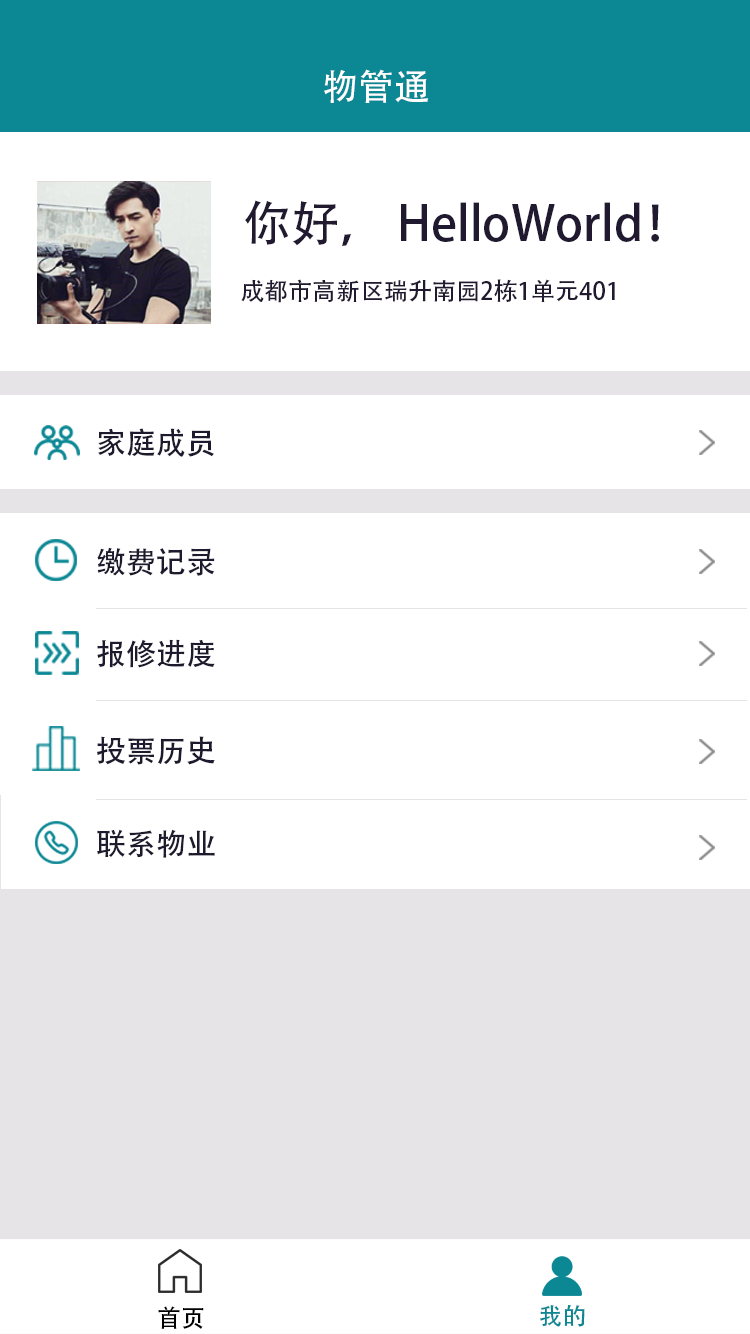
<style>
.page{position:relative;width:750px;height:1334px;background:#ffffff}
.page>*{position:absolute;margin:0}
.t1{font:36px "AdobeHeitiStd-Regular";color:#ffffff}
.t2{font:48px "AdobeHeitiStd-Regular";color:#20192f}
.t3{font:24px "AdobeHeitiStd-Regular";color:#20192f}
.t4{font:30px "AdobeHeitiStd-Regular";color:#1e1a2e}
.t5{font:24px "AdobeHeitiStd-Regular";color:#000000}
.t6{font:24px "AdobeHeitiStd-Regular";color:#0c8894}
</style>
<div class="page">
<p class="t1" style="left:324px;top:69px;width:105px;height:34px">物管通</p>
<p class="t2" style="left:245px;top:200px;width:414px;height:46px">你好， HelloWorld！</p>
<p class="t3" style="left:241px;top:279px;width:374px;height:24px">成都市高新区瑞升南园2栋1单元401</p>
<p class="t4" style="left:98px;top:428px;width:116px;height:29px">家庭成员</p>
<p class="t4" style="left:97px;top:547px;width:118px;height:29px">缴费记录</p>
<p class="t4" style="left:97px;top:639px;width:118px;height:29px">报修进度</p>
<p class="t4" style="left:97px;top:736px;width:118px;height:29px">投票历史</p>
<p class="t4" style="left:97px;top:829px;width:118px;height:29px">联系物业</p>
<p class="t5" style="left:158px;top:1306px;width:46px;height:23px">首页</p>
<p class="t6" style="left:540px;top:1305px;width:45px;height:22px">我的</p>
</div>
